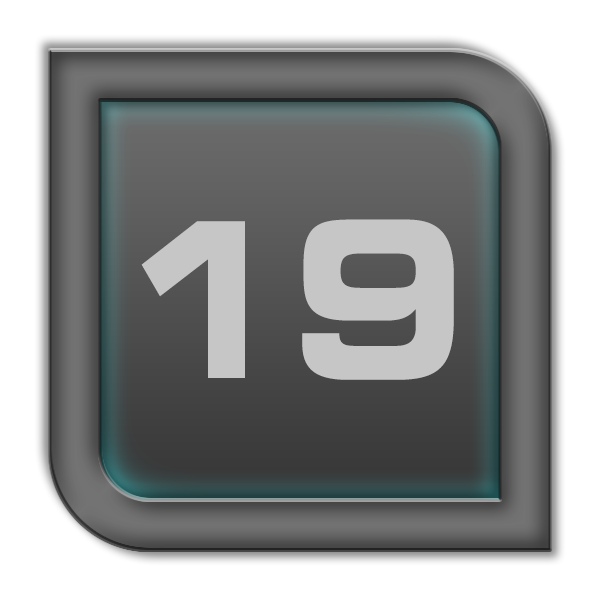
<style>
.page{position:relative;width:600px;height:600px;background:#ffffff}
.page>*{position:absolute;margin:0}
.t1{font:216px "EurostileLTStd-BoldEx2";color:#c6c6c6;scale:0.83 1}
</style>
<div class="page">
<p class="t1" style="left:141px;top:219px;width:313px;height:161px">19</p>
</div>
